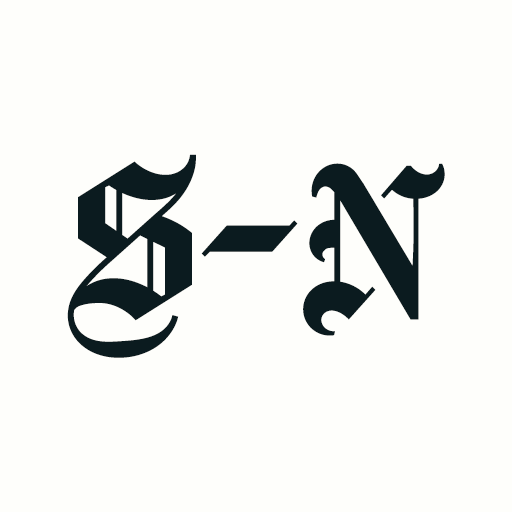
<style>
.page{position:relative;width:512px;height:512px;background:#fefefb}
.page>*{position:absolute;margin:0}
.t1{font:205.2px "Chomsky";color:#0b1b1f}
</style>
<div class="page">
<p class="t1" style="left:67px;top:154px;width:378px;height:204px">S-N</p>
</div>
